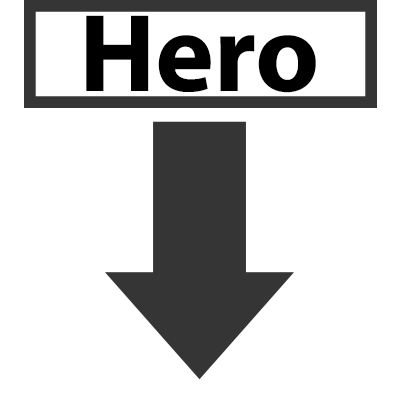
<style>
.page{position:relative;width:400px;height:400px;background:#ffffff}
.page>*{position:absolute;margin:0}
.t1{font:111.1px "MyriadPro-Bold";color:#000000}
</style>
<div class="page">
<p class="t1" style="left:86px;top:15px;width:230px;height:78px">Hero</p>
</div>
